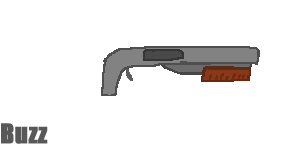
<style>
.page{position:relative;width:300px;height:150px;background:#ffffff}
.page>*{position:absolute;margin:0}
.t1{font:25px "Impact";color:#585858;font-weight:bold}
</style>
<div class="page">
<p class="t1" style="left:1px;top:123px;width:47px;height:21px">Buzz</p>
</div>
